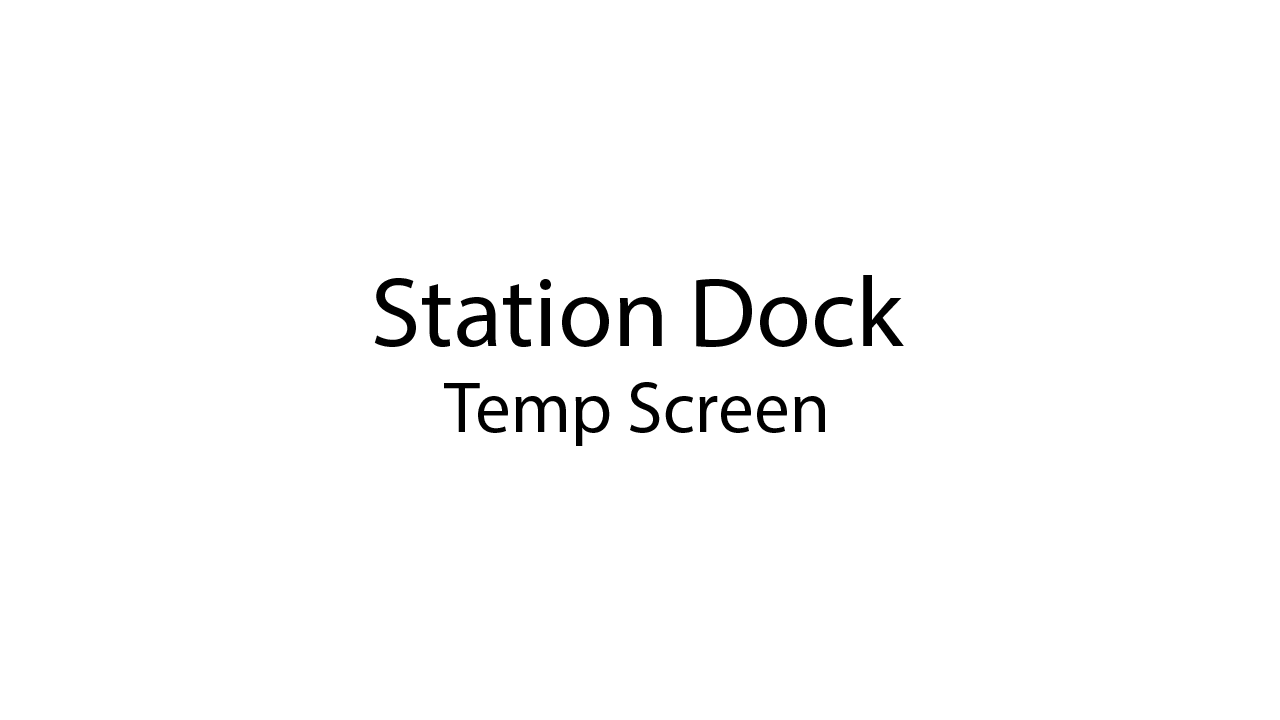
<style>
.page{position:relative;width:1280px;height:720px;background:#ffffff}
.page>*{position:absolute;margin:0}
.t1{font:100px "MyriadPro-Regular";color:#000000}
.t2{font:72px "MyriadPro-Regular";color:#000000}
</style>
<div class="page">
<p class="t1" style="left:374px;top:275px;width:530px;height:171px;text-align:center">Station Dock<br><span class="t2">Temp Screen</span></p>
</div>
